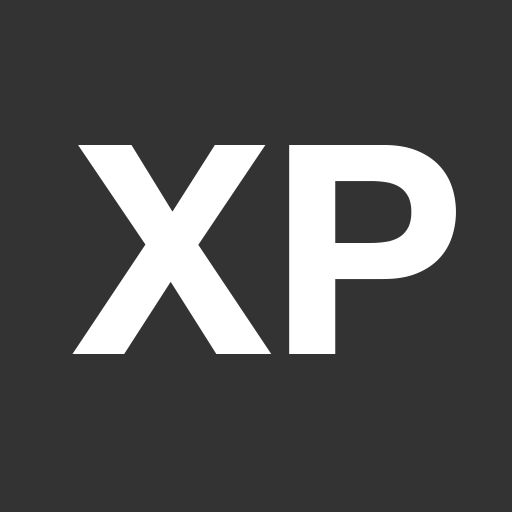
<style>
.page{position:relative;width:512px;height:512px;background:#333333}
.page>*{position:absolute;margin:0}
.t1{font:292.8px "HelveticaNeue-Bold";color:#ffffff}
</style>
<div class="page">
<p class="t1" style="left:72px;top:145px;width:384px;height:209px">XP</p>
</div>
